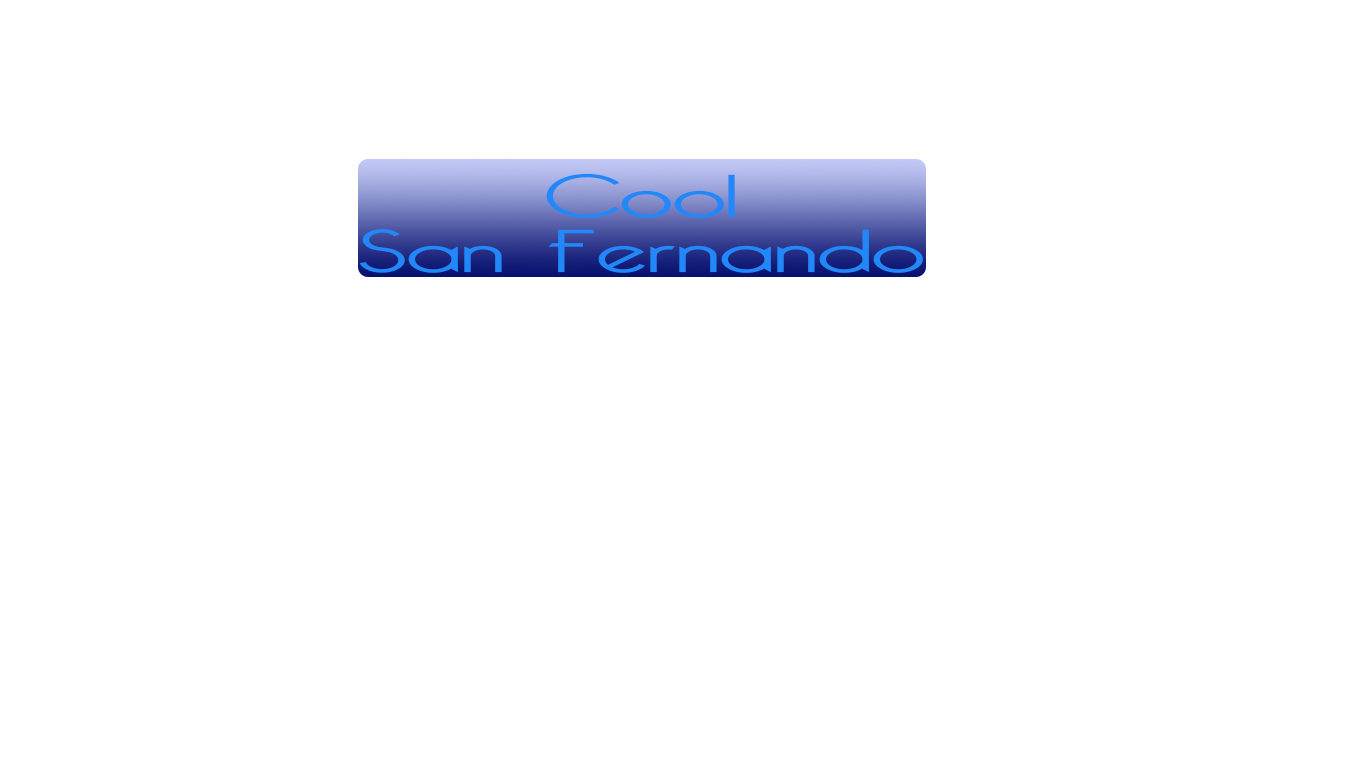
<style>
.page{position:relative;width:1366px;height:768px;background:#ffffff}
.page>*{position:absolute;margin:0}
.t1{font:59.2px/55px "BelleroseLight";color:#2287f9;scale:1.82 1}
</style>
<div class="page">
<p class="t1" style="left:359px;top:173px;width:564px;height:100px;text-align:center">Cool<br>San Fernando</p>
</div>
